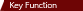
<style>
.page{position:relative;width:83px;height:11px;background:#6e0505}
.page>*{position:absolute;margin:0}
.t1{font:12px "THSarabunPSK"}
</style>
<div class="page">
<p class="t1" style="left:10px;top:2px;width:47px;height:8px">Key Function</p>
</div>
